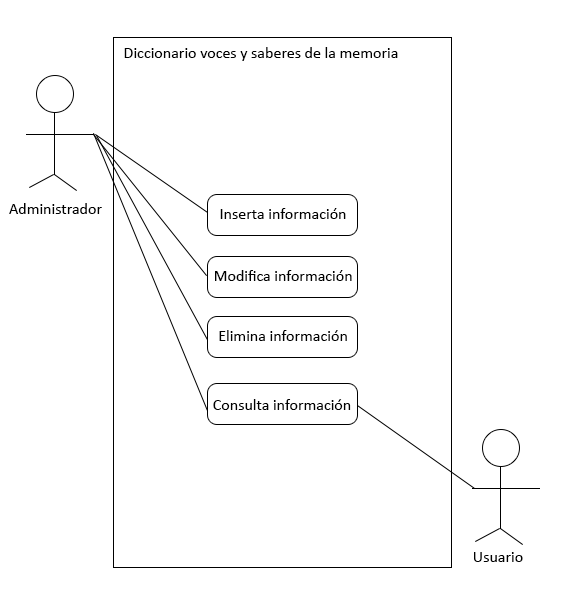
<style>
.page{position:relative;width:565px;height:603px;background:#ffffff}
.page>*{position:absolute;margin:0}
.t1{font:16px "Calibri";color:#000000}
</style>
<div class="page">
<p class="t1" style="left:124px;top:47px;width:274px;height:14px">Diccionario voces y saberes de la memoria</p>
<p class="t1" style="left:9px;top:203px;width:93px;height:11px">Administrador</p>
<p class="t1" style="left:220px;top:208px;width:126px;height:11px">Inserta información</p>
<p class="t1" style="left:215px;top:270px;width:137px;height:11px">Modifica información</p>
<p class="t1" style="left:219px;top:330px;width:128px;height:11px">Elimina información</p>
<p class="t1" style="left:213px;top:399px;width:138px;height:11px">Consulta información</p>
<p class="t1" style="left:474px;top:552px;width:49px;height:10px">Usuario</p>
</div>
